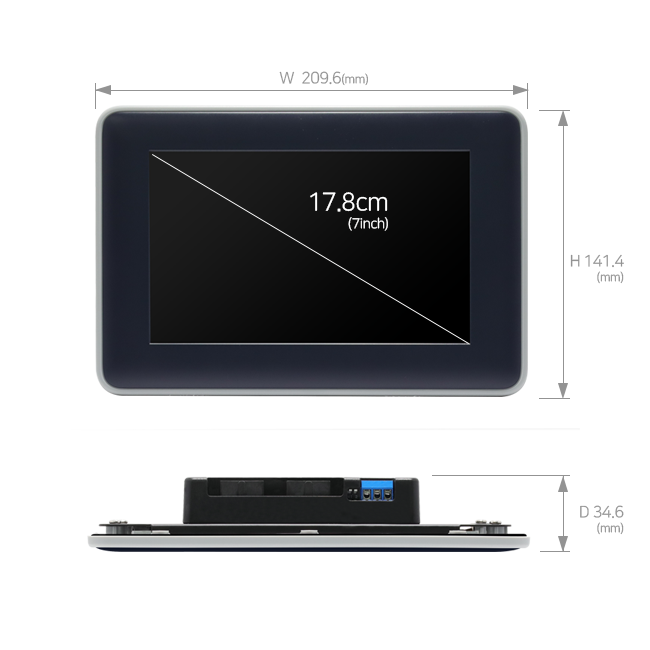
<style>
.page{position:relative;width:650px;height:650px;background:#ffffff}
.page>*{position:absolute;margin:0}
.t1{font:16px "NanumSquareR";letter-spacing:-0.03em;color:#939393}
.t2{font:12px "NanumSquareR";letter-spacing:-0.03em;color:#939393}
.t3{font:14px/18px "NanumSquareR";letter-spacing:-0.03em;color:#ffffff}
.t4{font:25px/18px "NanumSquareR";letter-spacing:-0.03em;color:#ffffff}
.t5{font:16px/15px "NanumSquareR";letter-spacing:-0.03em;color:#939393}
.t6{font:12px/15px "NanumSquareR";letter-spacing:-0.03em;color:#939393}
</style>
<div class="page">
<p class="t1" style="left:279px;top:71px;width:89px;height:15px">W  209.6<span class="t2">(mm)</span></p>
<p class="t3" style="left:310px;top:192px;width:78px;height:39px;text-align:right"><span class="t4">17.8cm<br></span>(7inch)</p>
<p class="t5" style="left:570px;top:254px;width:54px;height:30px;text-align:right">H 141.4<br><span class="t6">(mm)</span></p>
<p class="t5" style="left:580px;top:505px;width:44px;height:30px;text-align:right">D 34.6<br><span class="t6">(mm)</span></p>
</div>
